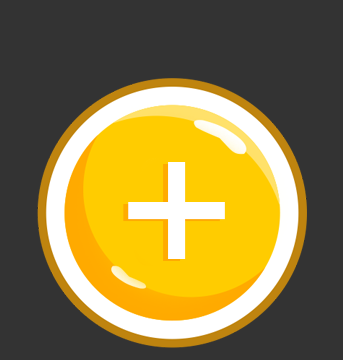
<style>
.page{position:relative;width:343px;height:360px;background:#333333}
.page>*{position:absolute;margin:0}
.t1{font:202.9px "ArialMT";color:#ffffff}
</style>
<div class="page">
<p class="t1" style="left:123px;top:164px;width:97px;height:97px">+</p>
<p class="t1" style="left:128px;top:162px;width:97px;height:97px">+</p>
</div>
